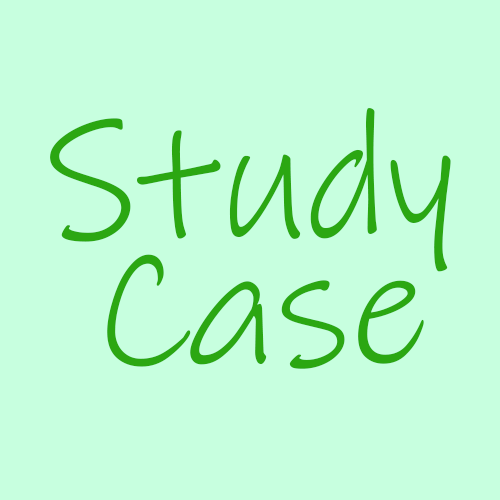
<style>
.page{position:relative;width:500px;height:500px;background:#c7ffdf}
.page>*{position:absolute;margin:0}
.t1{font:169.3px/127px "InkFree";color:#2ba712}
</style>
<div class="page">
<p class="t1" style="left:50px;top:108px;width:401px;height:261px">Study<br> Case</p>
</div>
